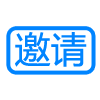
<style>
.page{position:relative;width:100px;height:100px;background:#ffffff}
.page>*{position:absolute;margin:0}
.t1{font:36px "MicrosoftYaHei";color:#0084ff}
</style>
<div class="page">
<p class="t1" style="left:15px;top:32px;width:72px;height:35px">邀请</p>
</div>
